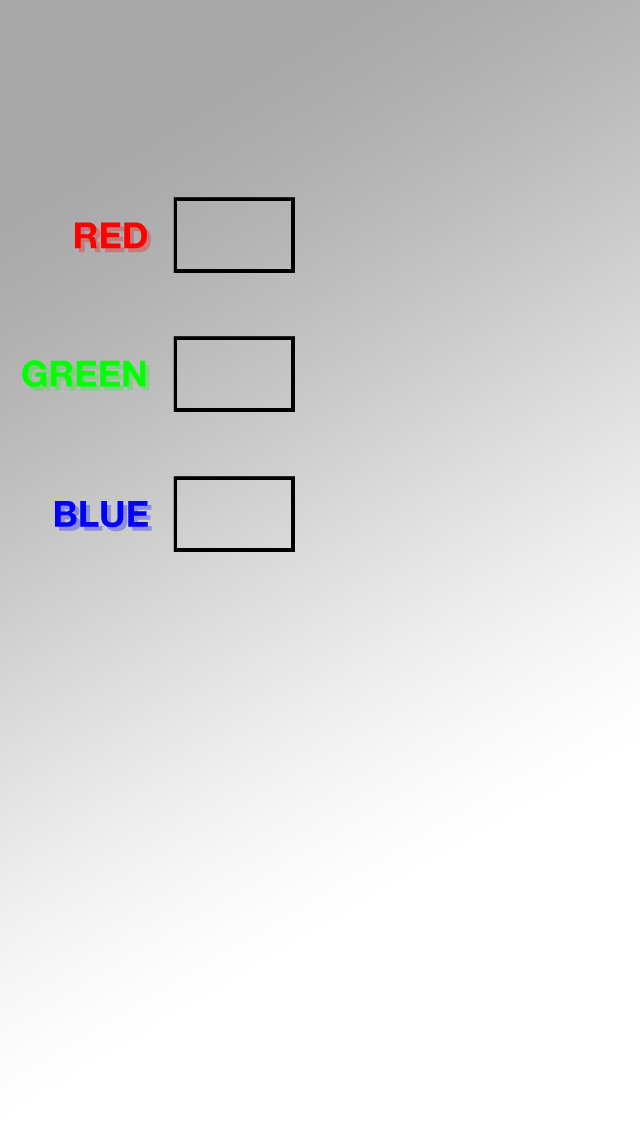
<style>
.page{position:relative;width:640px;height:1136px}
.page>*{position:absolute;margin:0}
.t1{font:36px "HelveticaNeue-Bold";color:#ff0000}
.t2{font:36px "HelveticaNeue-Bold";color:#00ff00}
.t3{font:36px "HelveticaNeue-Bold";color:#0000ff}
</style>
<div class="page">
<p class="t1" style="left:75px;top:222px;width:72px;height:27px">RED</p>
<p class="t2" style="left:22px;top:360px;width:124px;height:27px">GREEN</p>
<p class="t3" style="left:55px;top:501px;width:93px;height:27px">BLUE</p>
</div>
